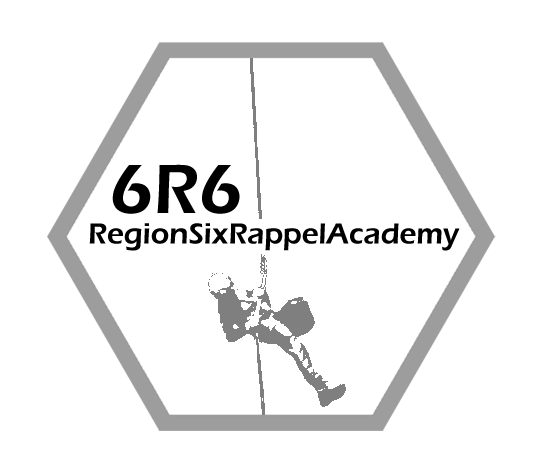
<style>
.page{position:relative;width:541px;height:470px;background:#ffffff}
.page>*{position:absolute;margin:0}
.t1{font:72px "ErasITC-Demi";color:#010000}
.t2{font:30px "ErasITC-Demi";color:#010000}
</style>
<div class="page">
<p class="t1" style="left:112px;top:164px;width:128px;height:50px">6R6</p>
<p class="t2" style="left:89px;top:223px;width:371px;height:28px">RegionSixRappelAcademy</p>
</div>
